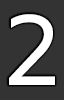
<style>
.page{position:relative;width:64px;height:100px;background:#333333}
.page>*{position:absolute;margin:0}
.t1{font:100px "Amiko-Regular";color:#ffffff}
</style>
<div class="page">
<p class="t1" style="left:9px;top:14px;width:46px;height:71px">2</p>
</div>
